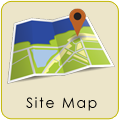
<style>
.page{position:relative;width:120px;height:120px;background:#ece5c9}
.page>*{position:absolute;margin:0}
.t1{font:14px "CenturyGothic";letter-spacing:0.121em;color:#000000}
</style>
<div class="page">
<p class="t1" style="left:26px;top:97px;width:71px;height:14px">Site Map</p>
</div>
